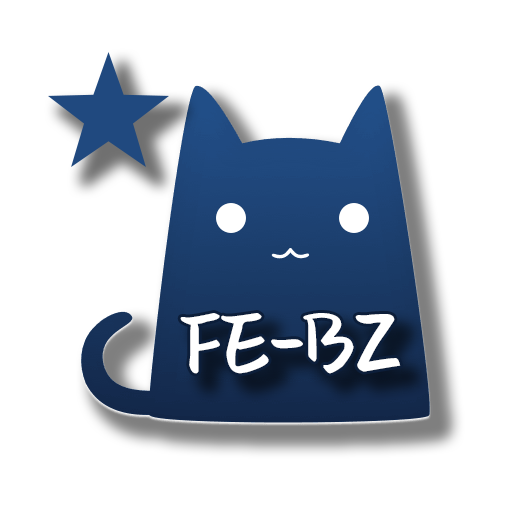
<style>
.page{position:relative;width:512px;height:512px;background:#ffffff}
.page>*{position:absolute;margin:0}
.t1{font:84.4px "miaobigezhiguodongti";color:#ffffff}
</style>
<div class="page">
<p class="t1" style="left:180px;top:313px;width:221px;height:61px">FE-BZ</p>
</div>
